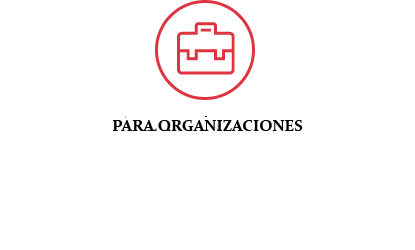
<style>
.page{position:relative;width:415px;height:250px;background:#ffffff}
.page>*{position:absolute;margin:0}
.t1{font:16px "Constantia-Bold";color:#000000;text-transform:uppercase}
</style>
<div class="page">
<p class="t1" style="left:113px;top:120px;width:190px;height:11px">Para organizaciones</p>
</div>
